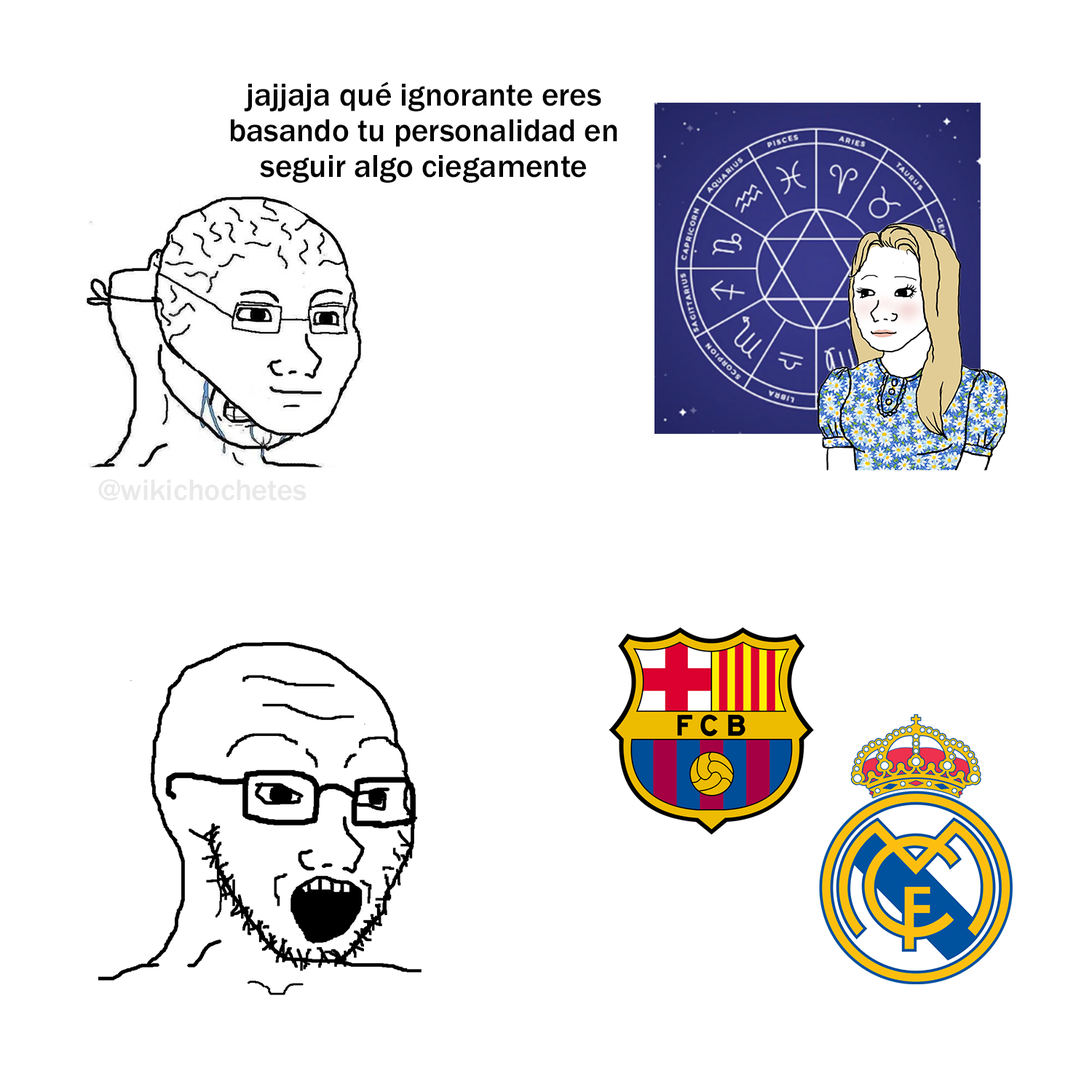
<style>
.page{position:relative;width:1092px;height:1092px;background:#ffffff}
.page>*{position:absolute;margin:0}
.t1{font:32.7px "FranklinGothic-Medium";color:#000000}
.t2{font:30.7px "FranklinGothic-Medium";color:#e9e9e9}
</style>
<div class="page">
<p class="t1" style="left:231px;top:82px;width:386px;height:101px;text-align:center">jajjaja qué ignorante eres<br>basando tu personalidad en<br>seguir algo ciegamente</p>
<p class="t2" style="left:98px;top:479px;width:208px;height:22px">@wikichochetes</p>
</div>
